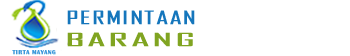
<style>
.page{position:relative;width:350px;height:56px;background:#ffffff}
.page>*{position:absolute;margin:0}
.t1{font:17.6px "AgencyFB-Reg";letter-spacing:0.05em;color:#1576bc;font-weight:bold;scale:1.59 1}
.t2{font:17.6px "AgencyFB-Reg";letter-spacing:0.05em;color:#80a421;font-weight:bold;scale:2.52 1}
.t3{font:6px "BritannicBold";letter-spacing:0.05em;color:#3d99da;font-weight:bold}
</style>
<div class="page">
<p class="t1" style="left:67px;top:10px;width:128px;height:15px">PERMINTAAN</p>
<p class="t2" style="left:67px;top:32px;width:126px;height:15px">BARANG</p>
<p class="t3" style="left:12px;top:50px;width:44px;height:5px">TIRTA MAYANG</p>
</div>
